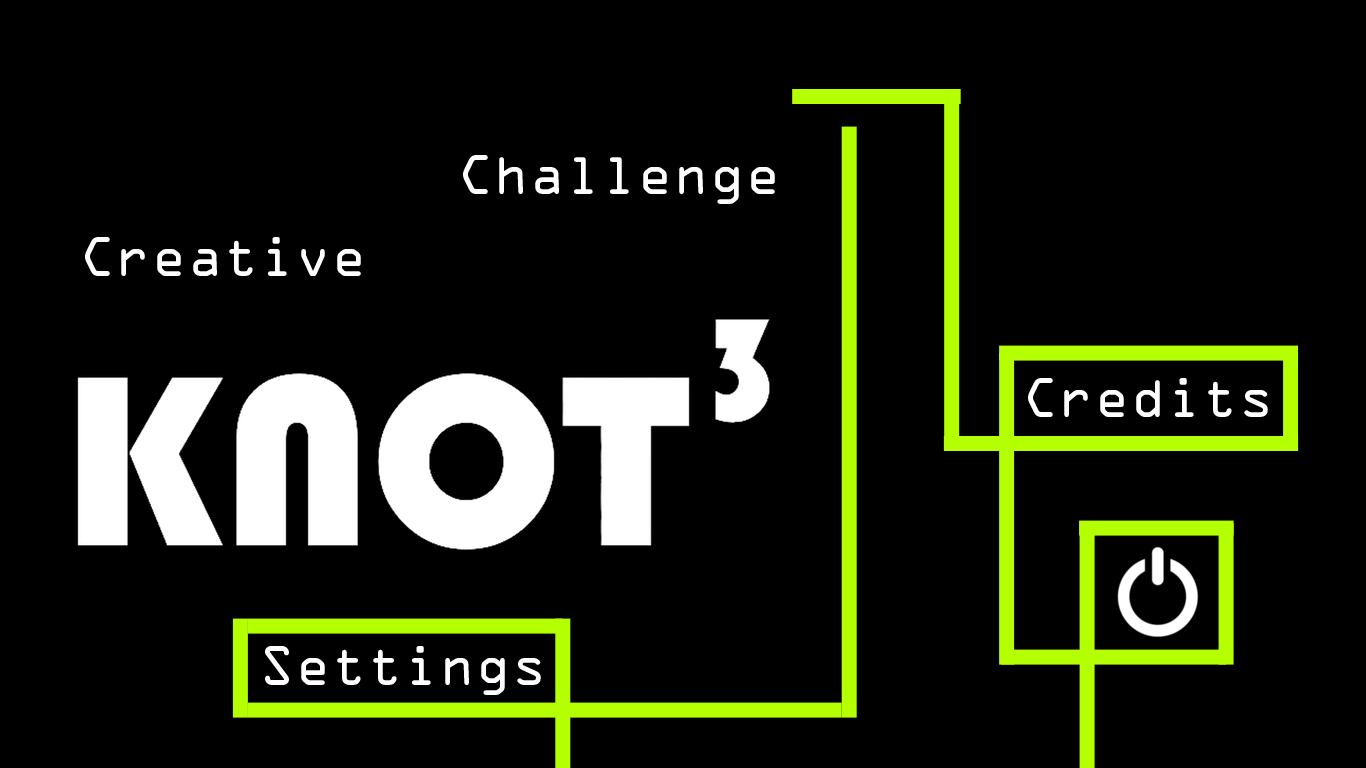
<style>
.page{position:relative;width:1366px;height:768px;background:#000000}
.page>*{position:absolute;margin:0}
.t1{font:50px "OCRAStd";color:#ffffff}
</style>
<div class="page">
<p class="t1" style="left:463px;top:155px;width:312px;height:49px">Challenge</p>
<p class="t1" style="left:85px;top:237px;width:276px;height:39px">Creative</p>
<p class="t1" style="left:1028px;top:378px;width:240px;height:39px">Credits</p>
<p class="t1" style="left:265px;top:646px;width:276px;height:49px">Settings</p>
</div>
